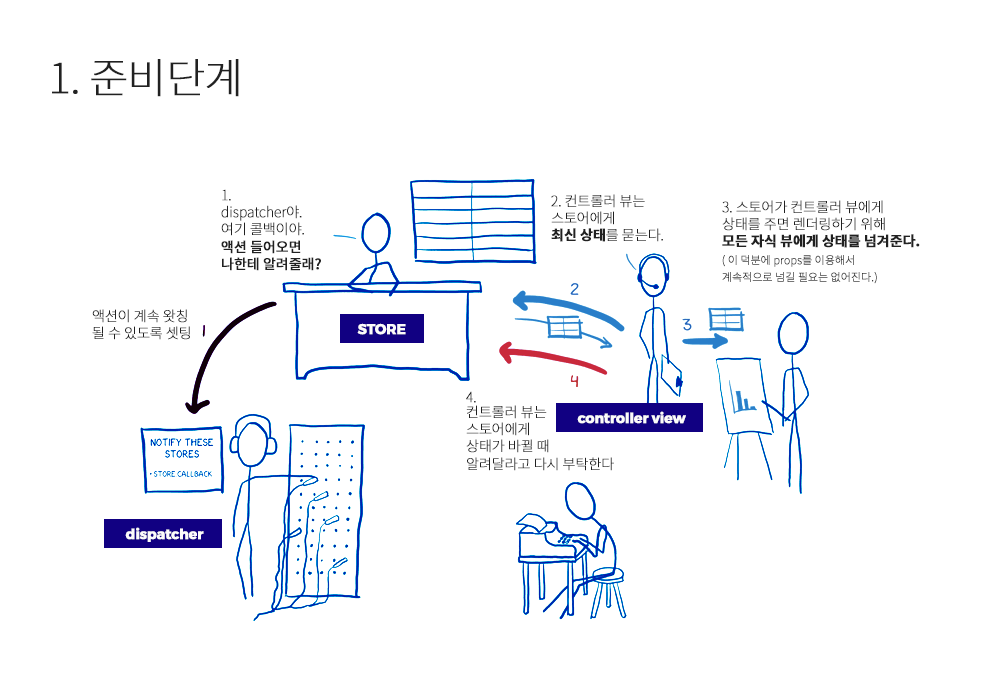
<style>
.page{position:relative;width:1000px;height:700px;background:#ffffff}
.page>*{position:absolute;margin:0}
.t1{font:41.7px "NotoSansCJKkr-Thin";letter-spacing:-0.025em;color:#212121;font-weight:bold}
.t2{font:14px/15px "NotoSansCJKkr-Thin";letter-spacing:-0.025em;color:#212121;font-weight:bold}
.t3{font:14px/15px "NotoSansCJKkr-Medium";letter-spacing:-0.025em;color:#212121;font-weight:bold}
.t4{font:14px/15px "NotoSansCJKkr-Bold";letter-spacing:-0.025em;color:#212121;font-weight:bold}
.t5{font:11px/15px "NotoSansCJKkr-Light";letter-spacing:-0.025em;color:#212121;font-weight:bold}
.t6{font:14px "Montserrat-Bold";letter-spacing:-0.025em;color:#fcfbfb;font-weight:bold}
</style>
<div class="page">
<p class="t1" style="left:52px;top:59px;width:187px;height:38px">1. 준비단계</p>
<p class="t2" style="left:221px;top:189px;width:100px;height:82px">1. <br>dispatcher야.<br>여기 콜백이야. <br><span class="t3">액션 들어오면 <br>나한테 알려줄래?</span></p>
<p class="t2" style="left:551px;top:194px;width:112px;height:48px">2. 컨트롤러 뷰는 <br>스토어에게 <br><span class="t4">최신 상태</span>를 묻는다.</p>
<p class="t5" style="left:722px;top:200px;width:198px;height:84px"><span class="t2">3. 스토어가 컨트롤러 뷰에게 <br>상태를 주면 렌더링하기 위해 <br></span><span class="t4">모든 자식 뷰에게 상태를 넘겨준다.<br></span>( 이 덕분에 props를 이용해서 <br>계속적으로 넘길 필요는 없어진다.)</p>
<p class="t2" style="left:92px;top:309px;width:98px;height:31px">액션이 계속 왓칭 <br>될 수 있도록 셋팅</p>
<p class="t6" style="left:357px;top:323px;width:49px;height:12px">STORE</p>
<p class="t2" style="left:466px;top:391px;width:148px;height:80px">4. <br>컨트롤러 뷰는 <br>스토어에게 <br>상태가 바뀔 때 <br>알려달라고 다시 부탁한다</p>
<p class="t6" style="left:577px;top:411px;width:109px;height:13px">controller view</p>
<p class="t6" style="left:125px;top:527px;width:79px;height:15px">dispatcher</p>
</div>
